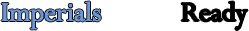
<style>
.page{position:relative;width:249px;height:31px;background:#ffffff}
.page>*{position:absolute;margin:0}
.t1{font:30px "Perpetua";color:#6c98d9}
.t2{font:30px "Perpetua";color:#000000}
</style>
<div class="page">
<p class="t1" style="left:1px;top:1px;width:247px;height:29px">Imperials   <span class="t2">Ready</span></p>
</div>
